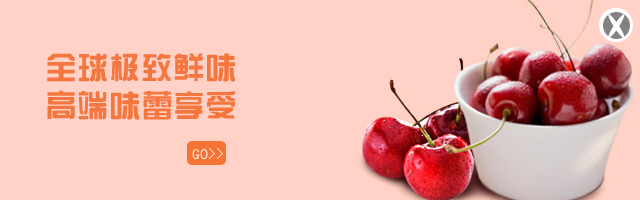
<style>
.page{position:relative;width:640px;height:200px;background:#ffd1c7}
.page>*{position:absolute;margin:0}
.t1{font:34px "309";color:#ffffff;text-transform:uppercase}
.t2{font:32px/38px "RS_ZongYi";color:#f4773f;text-transform:uppercase}
.t3{font:16px "GBJenLei-Medium";color:#ffffff;text-transform:uppercase}
</style>
<div class="page">
<p class="t1" style="left:608px;top:14px;width:17px;height:24px">X</p>
<p class="t2" style="left:47px;top:53px;width:189px;height:67px">全球极致鲜味<br>高端味蕾享受</p>
<p class="t3" style="left:192px;top:147px;width:31px;height:13px">go&gt;&gt;</p>
</div>
